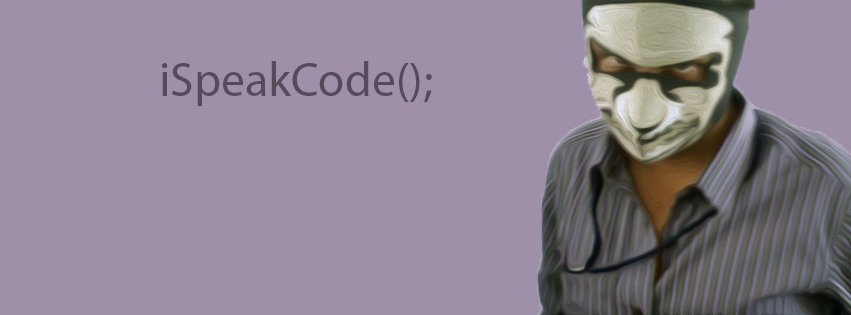
<style>
.page{position:relative;width:851px;height:315px;background:#9e90a9}
.page>*{position:absolute;margin:0}
.t1{font:48px "MyriadPro-Regular";color:#544c5a}
</style>
<div class="page">
<p class="t1" style="left:162px;top:61px;width:270px;height:45px">iSpeakCode();</p>
</div>
